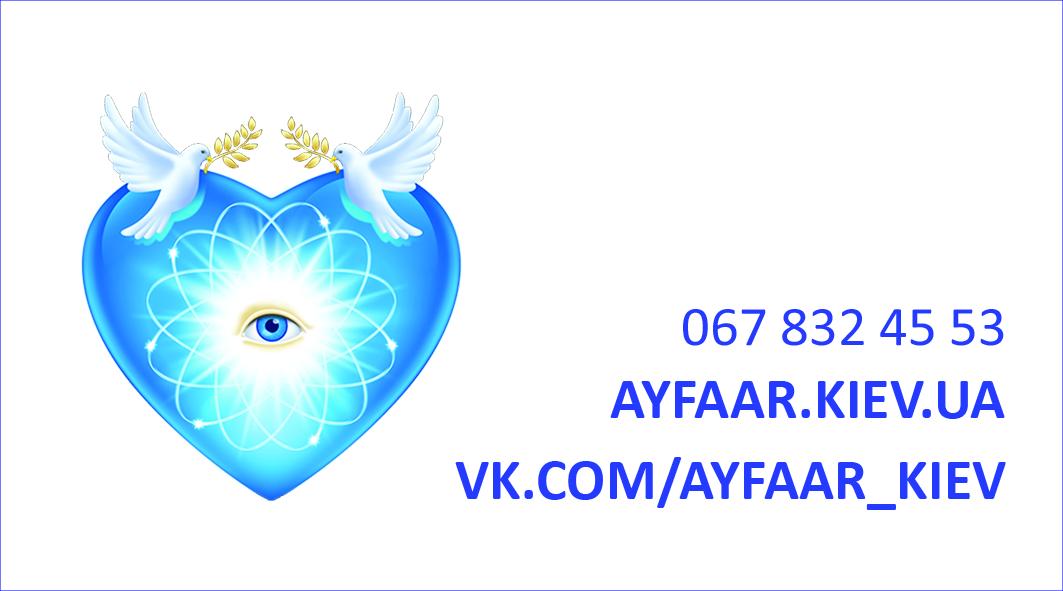
<style>
.page{position:relative;width:1063px;height:591px;background:#ffffff}
.page>*{position:absolute;margin:0}
.t1{font:56.1px "Calibri";color:#243bff;text-transform:uppercase}
.t2{font:58.3px "Calibri-Bold";color:#243bff;text-transform:uppercase}
</style>
<div class="page">
<p class="t1" style="left:683px;top:309px;width:321px;height:37px">067 832 45 53</p>
<p class="t2" style="left:610px;top:381px;width:395px;height:38px">ayfaar.kiev.ua</p>
<p class="t2" style="left:455px;top:457px;width:551px;height:53px">vk.com/ayfaar_kiev</p>
</div>
